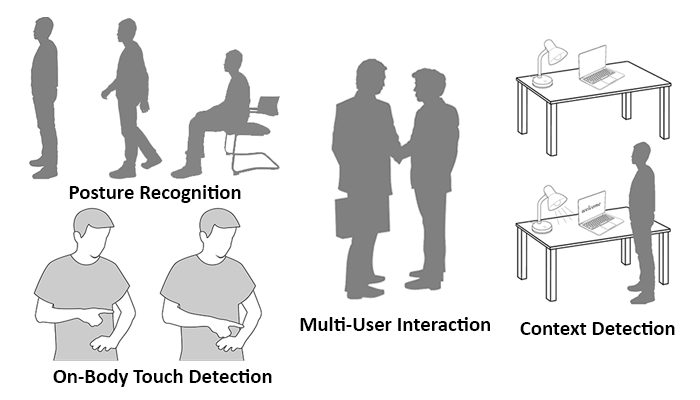
<style>
.page{position:relative;width:700px;height:400px;background:#ffffff}
.page>*{position:absolute;margin:0}
.t1{font:20.8px "Calibri-Bold";color:#000000}
</style>
<div class="page">
<p class="t1" style="left:69px;top:185px;width:172px;height:18px">Posture Recognition</p>
<p class="t1" style="left:300px;top:317px;width:190px;height:14px">Multi-User Interaction</p>
<p class="t1" style="left:520px;top:321px;width:155px;height:14px">Context Detection</p>
<p class="t1" style="left:53px;top:369px;width:219px;height:18px">On-Body Touch Detection</p>
</div>
